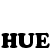
<style>
.page{position:relative;width:50px;height:50px;background:#ffffff}
.page>*{position:absolute;margin:0}
.t1{font:20px "CooperBlackStd";color:#000000}
</style>
<div class="page">
<p class="t1" style="left:1px;top:32px;width:49px;height:16px">HUE</p>
</div>
